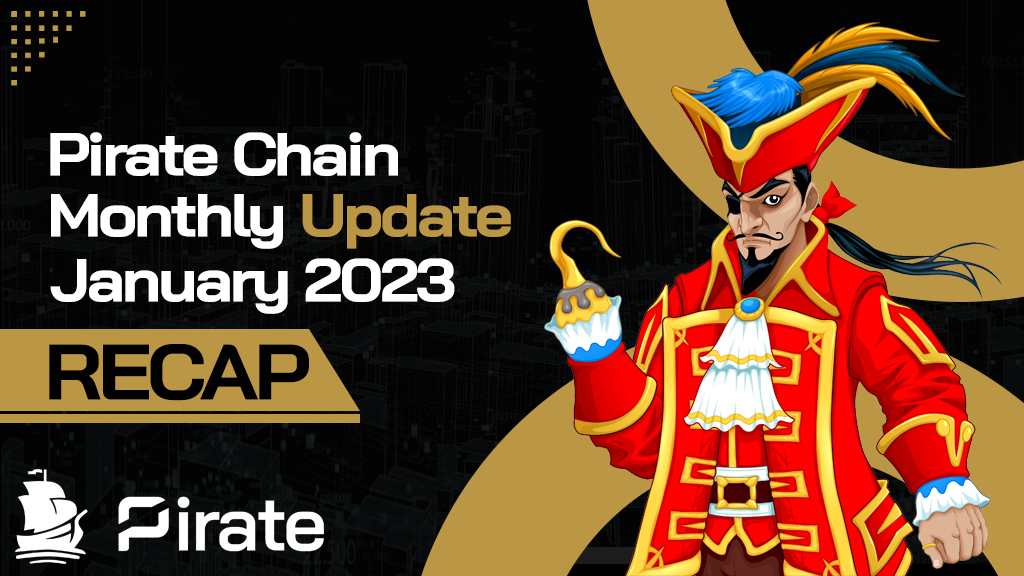
<style>
.page{position:relative;width:1024px;height:576px}
.page>*{position:absolute;margin:0}
.t1{font:39.7px "Verdana";letter-spacing:-0.05em;color:#bb9645;scale:1.1 1}
.t2{font:60.3px "BaiJamjuree-Bold";letter-spacing:-0.05em;color:#ffffff;scale:1.1 1}
.t3{font:60.3px "BaiJamjuree-Bold";letter-spacing:-0.05em;color:#bb9645;scale:1.1 1}
.t4{font:78.1px "BaiJamjuree-Bold";letter-spacing:-0.05em;color:#000000;text-transform:uppercase;scale:1.1 1}
</style>
<div class="page">
<p class="t1" style="left:11px;top:11px;width:75px;height:6px;rotate:180deg">......</p>
<p class="t1" style="left:11px;top:11px;width:6px;height:75px;rotate:-90deg">......</p>
<p class="t2" style="left:50px;top:132px;width:348px;height:44px">Pirate Chain</p>
<p class="t2" style="left:51px;top:194px;width:460px;height:55px">Monthly <span class="t3">Update</span></p>
<p class="t2" style="left:50px;top:258px;width:405px;height:56px">January 2023</p>
<p class="t4" style="left:49px;top:344px;width:260px;height:57px">recap</p>
</div>
